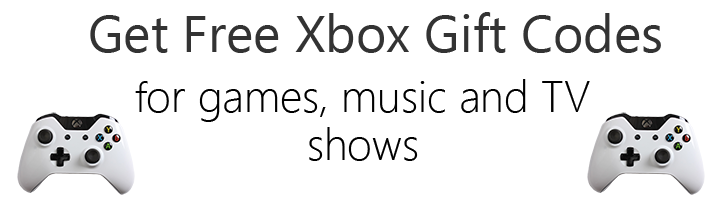
<style>
.page{position:relative;width:720px;height:200px;background:#ffffff}
.page>*{position:absolute;margin:0}
.t1{font:52px "SegoeUI";color:#333333}
.t2{font:44px/48px "SegoeUI-Light";color:#000000}
.t3{font:42px/48px "SegoeUI-Light";color:#000000}
</style>
<div class="page">
<p class="t1" style="left:90px;top:12px;width:571px;height:41px">Get Free Xbox Gift Codes</p>
<p class="t2" style="left:135px;top:79px;width:455px;height:82px;text-align:center"><span class="t3">f</span>or games, music and TV shows</p>
</div>
